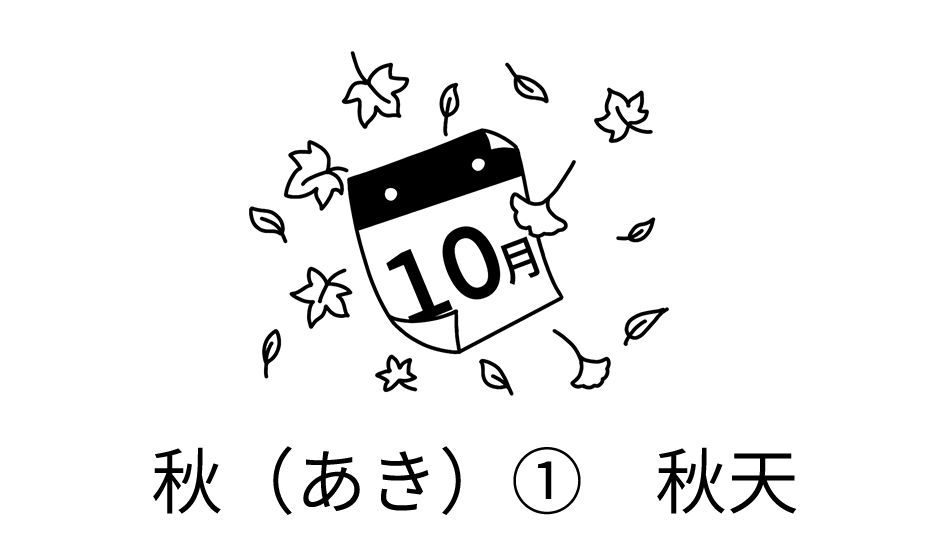
<style>
.page{position:relative;width:945px;height:558px;background:#ffffff}
.page>*{position:absolute;margin:0}
.t1{font:72px "SourceHanSansCN-Normal";color:#000000}
</style>
<div class="page">
<p class="t1" style="left:153px;top:446px;width:644px;height:69px">秋（あき）①　秋天</p>
</div>
